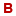
<style>
.page{position:relative;width:16px;height:16px;background:#ffffff}
.page>*{position:absolute;margin:0}
.t1{font:14px "Helvetica-Bold";letter-spacing:-0.025em;color:#ba0000}
</style>
<div class="page">
<p class="t1" style="left:4px;top:3px;width:9px;height:10px">B</p>
</div>
